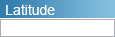
<style>
.page{position:relative;width:115px;height:37px;background:#ffffff}
.page>*{position:absolute;margin:0}
.t1{font:14px "ArialMT";color:#ffffff}
</style>
<div class="page">
<p class="t1" style="left:6px;top:4px;width:49px;height:11px">Latitude</p>
</div>
